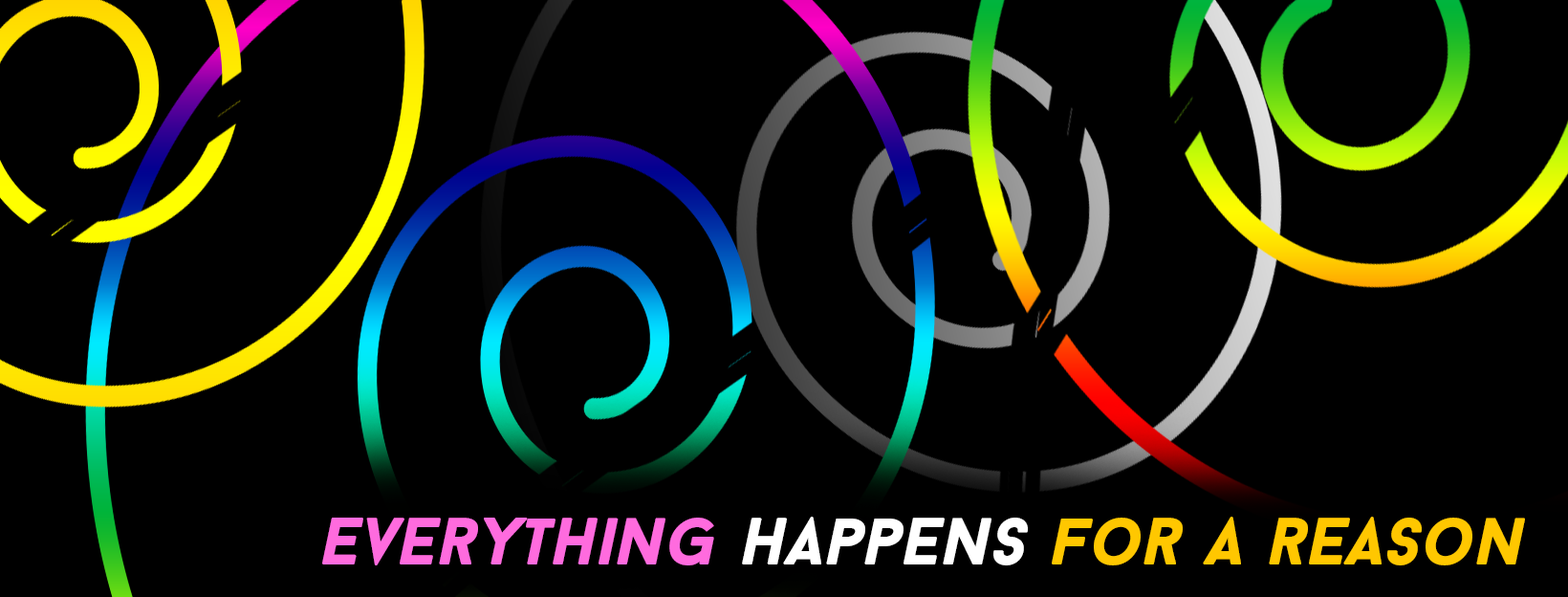
<style>
.page{position:relative;width:1568px;height:597px;background:#000000}
.page>*{position:absolute;margin:0}
.t1{font:66.9px "BaronNeueBlackItalic";color:#ffc700}
.t2{font:66.9px "BaronNeueBlackItalic";color:#ff6bde}
.t3{font:66.9px "BaronNeueBlackItalic";color:#ffffff}
</style>
<div class="page">
<p class="t1" style="left:322px;top:516px;width:1203px;height:49px"><span class="t2">EverYthing</span><span class="t3"> happens </span>for a reason</p>
</div>
